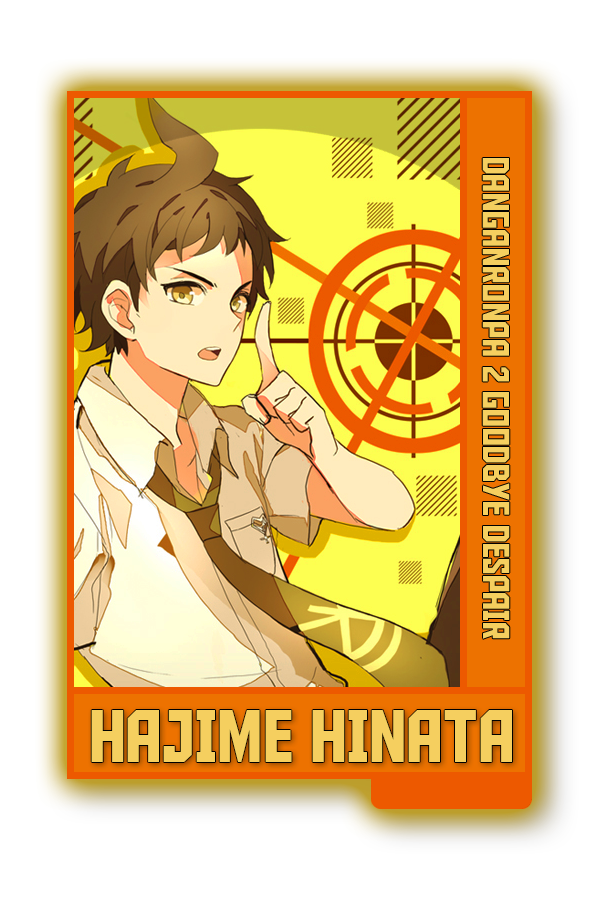
<style>
.page{position:relative;width:600px;height:900px;background:#ffffff}
.page>*{position:absolute;margin:0}
.t1{font:37.3px "AldotheApache";color:#f5cf5f}
.t2{font:74.4px "AldotheApache";color:#f5cf5f}
</style>
<div class="page">
<p class="t1" style="left:482px;top:158px;width:28px;height:481px;rotate:90deg">DANGANRONPA 2 GOODBYE DESPAIR</p>
<p class="t2" style="left:91px;top:710px;width:421px;height:52px">HAJIME HINATA</p>
</div>
